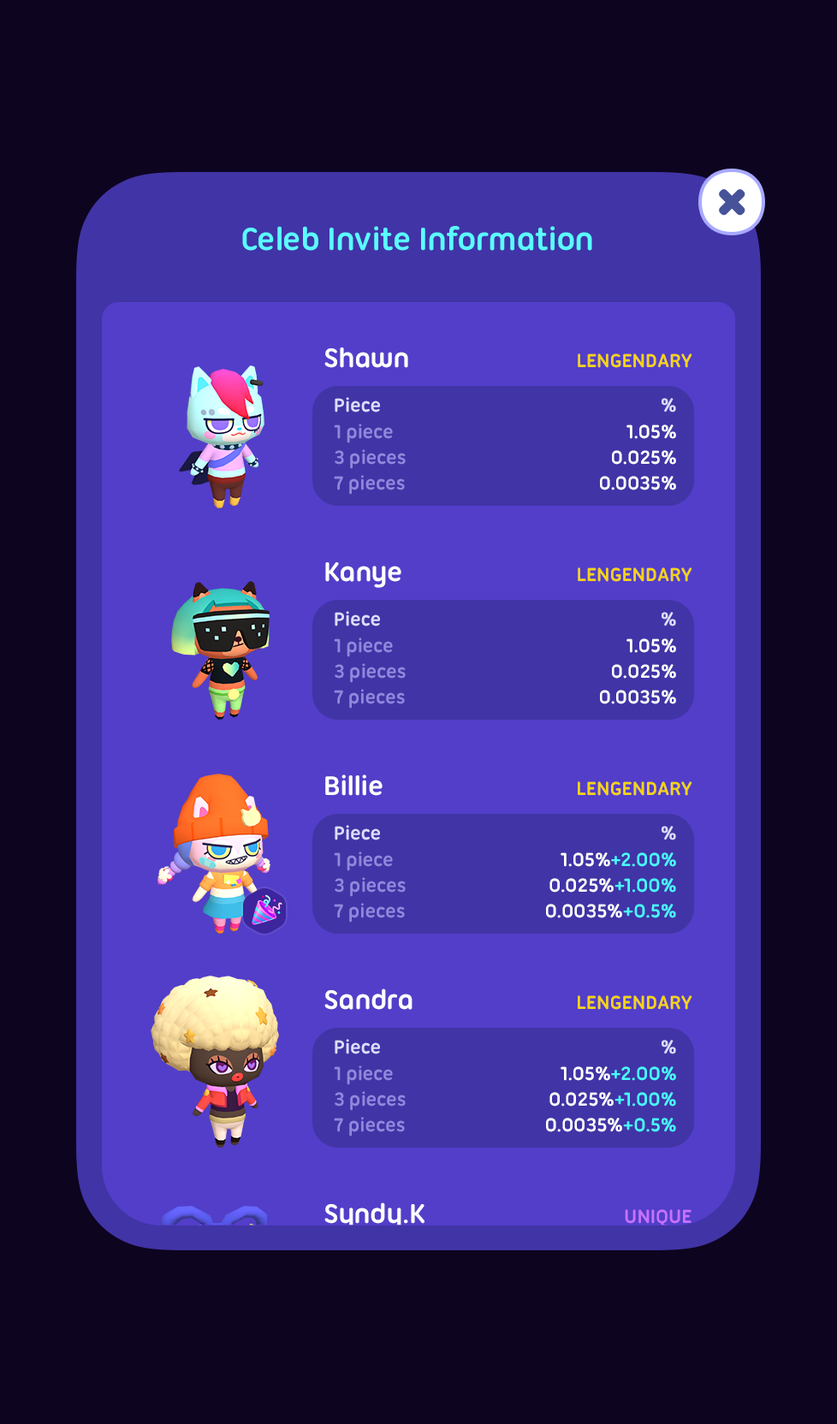
<style>
.page{position:relative;width:837px;height:1424px;background:#0d0420}
.page>*{position:absolute;margin:0}
.t1{font:34.2px "UbuntuTitling-Bold";letter-spacing:-0.025em;color:#5afdff}
.t2{font:29.1px "UbuntuTitling-Bold";letter-spacing:-0.025em;color:#ffffff}
.t3{font:20.5px "UbuntuTitling-Bold";letter-spacing:-0.025em;color:#f5d316;text-transform:uppercase}
.t4{font:20.5px "UbuntuTitling-Bold";letter-spacing:-0.025em;color:#ddddff}
.t5{font:20.5px/25.7px "UbuntuTitling-Bold";letter-spacing:-0.025em;color:#9187dd}
.t6{font:20.5px/25.7px "UbuntuTitling-Bold";letter-spacing:-0.025em;color:#ffffff}
.t7{font:20.5px/25.7px "UbuntuTitling-Bold";letter-spacing:-0.025em;color:#48fbfd}
.t8{font:20.5px "UbuntuTitling-Bold";letter-spacing:-0.025em;color:#c872ff;text-transform:uppercase}
</style>
<div class="page">
<p class="t1" style="left:242px;top:226px;width:350px;height:25px">Celeb Invite Information</p>
<p class="t2" style="left:324px;top:348px;width:84px;height:20px">Shawn</p>
<p class="t3" style="left:578px;top:354px;width:114px;height:14px">Lengendary</p>
<p class="t4" style="left:335px;top:397px;width:45px;height:16px">Piece</p>
<p class="t4" style="left:662px;top:398px;width:14px;height:15px">%</p>
<p class="t5" style="left:334px;top:424px;width:72px;height:71px">1 piece<br>3 pieces<br>7 pieces</p>
<p class="t6" style="left:600px;top:425px;width:76px;height:65px;text-align:right">1.05%<br>0.025%<br>0.0035%</p>
<p class="t2" style="left:325px;top:562px;width:76px;height:26px">Kanye</p>
<p class="t3" style="left:578px;top:568px;width:114px;height:14px">Lengendary</p>
<p class="t4" style="left:335px;top:611px;width:45px;height:16px">Piece</p>
<p class="t4" style="left:662px;top:612px;width:14px;height:15px">%</p>
<p class="t5" style="left:334px;top:638px;width:72px;height:71px">1 piece<br>3 pieces<br>7 pieces</p>
<p class="t6" style="left:600px;top:639px;width:76px;height:65px;text-align:right">1.05%<br>0.025%<br>0.0035%</p>
<p class="t2" style="left:325px;top:775px;width:58px;height:21px">Billie</p>
<p class="t3" style="left:578px;top:782px;width:114px;height:14px">Lengendary</p>
<p class="t4" style="left:335px;top:825px;width:45px;height:16px">Piece</p>
<p class="t4" style="left:662px;top:826px;width:14px;height:15px">%</p>
<p class="t5" style="left:334px;top:852px;width:72px;height:71px">1 piece<br>3 pieces<br>7 pieces</p>
<p class="t6" style="left:546px;top:853px;width:130px;height:65px;text-align:right">1.05%<span class="t7">+2.00%<br></span>0.025%<span class="t7">+1.00%<br></span>0.0035%<span class="t7">+0.5%</span></p>
<p class="t2" style="left:324px;top:989px;width:89px;height:21px">Sandra</p>
<p class="t3" style="left:578px;top:996px;width:114px;height:14px">Lengendary</p>
<p class="t4" style="left:335px;top:1039px;width:45px;height:16px">Piece</p>
<p class="t4" style="left:662px;top:1040px;width:14px;height:15px">%</p>
<p class="t5" style="left:334px;top:1066px;width:72px;height:71px">1 piece<br>3 pieces<br>7 pieces</p>
<p class="t6" style="left:546px;top:1067px;width:130px;height:65px;text-align:right">1.05%<span class="t7">+2.00%<br></span>0.025%<span class="t7">+1.00%<br></span>0.0035%<span class="t7">+0.5%</span></p>
<p class="t2" style="left:324px;top:1203px;width:101px;height:27px">Syndy.K</p>
<p class="t8" style="left:625px;top:1210px;width:67px;height:17px">Unique</p>
</div>
